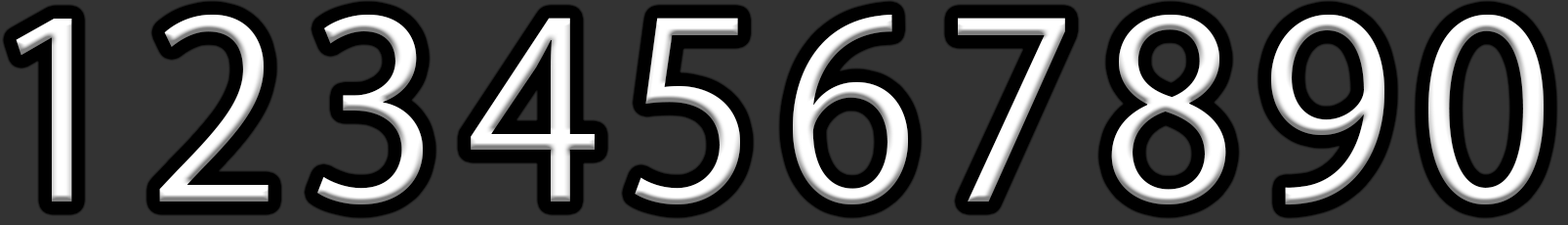
<style>
.page{position:relative;width:1568px;height:225px;background:#333333}
.page>*{position:absolute;margin:0}
.t1{font:244.1px "KozGoPr6N-Regular";letter-spacing:0.1em;color:#ffffff}
</style>
<div class="page">
<p class="t1" style="left:16px;top:15px;width:1528px;height:190px">1234567890</p>
</div>
